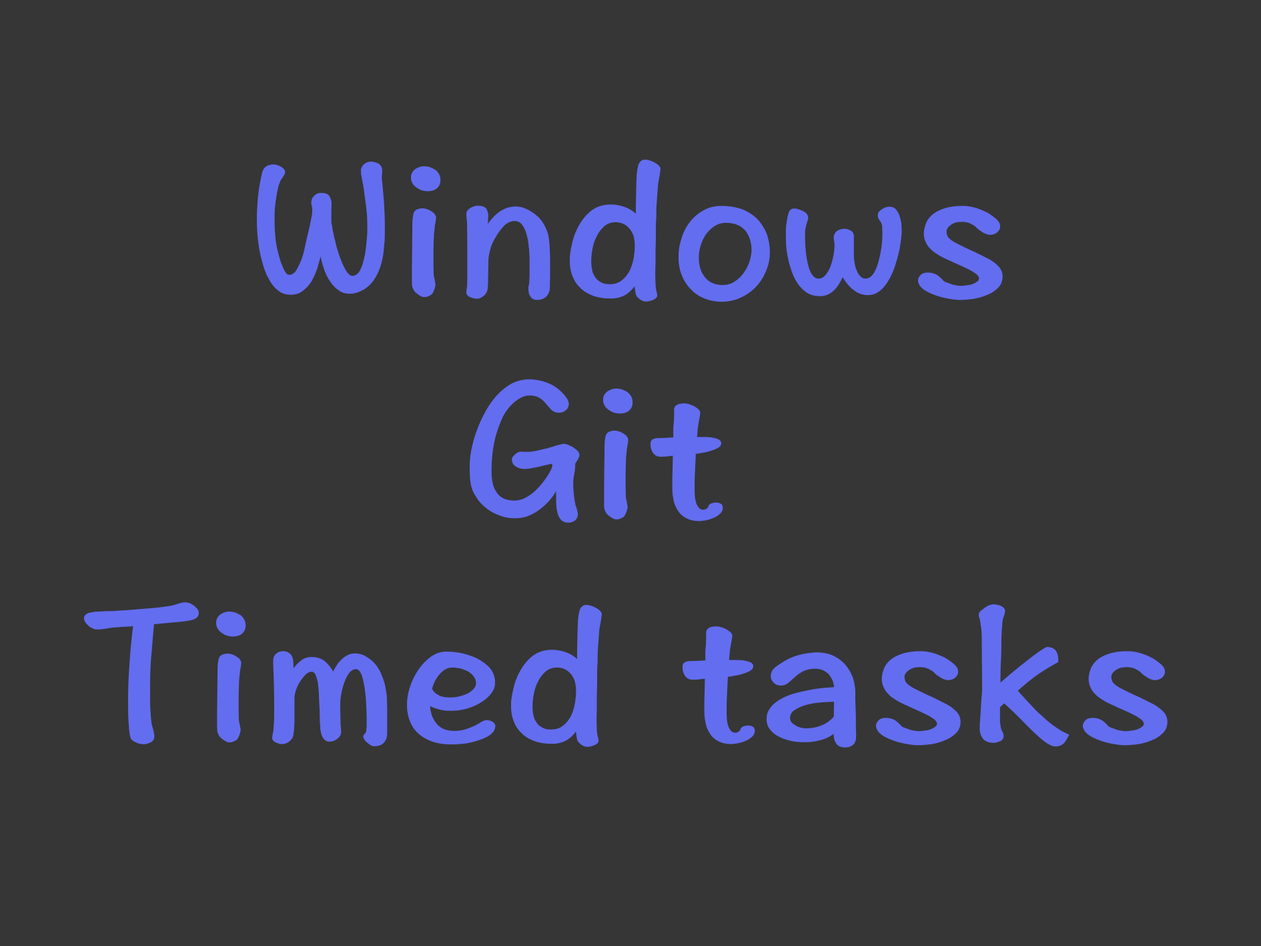
<style>
.page{position:relative;width:1261px;height:946px;background:#363636}
.page>*{position:absolute;margin:0}
.t1{font:200.2px/222.4px "HannotateSC-W7";color:#636def}
</style>
<div class="page">
<p class="t1" style="left:84px;top:159px;width:1084px;height:588px;text-align:center">Windows<br>Git <br>Timed tasks</p>
</div>
